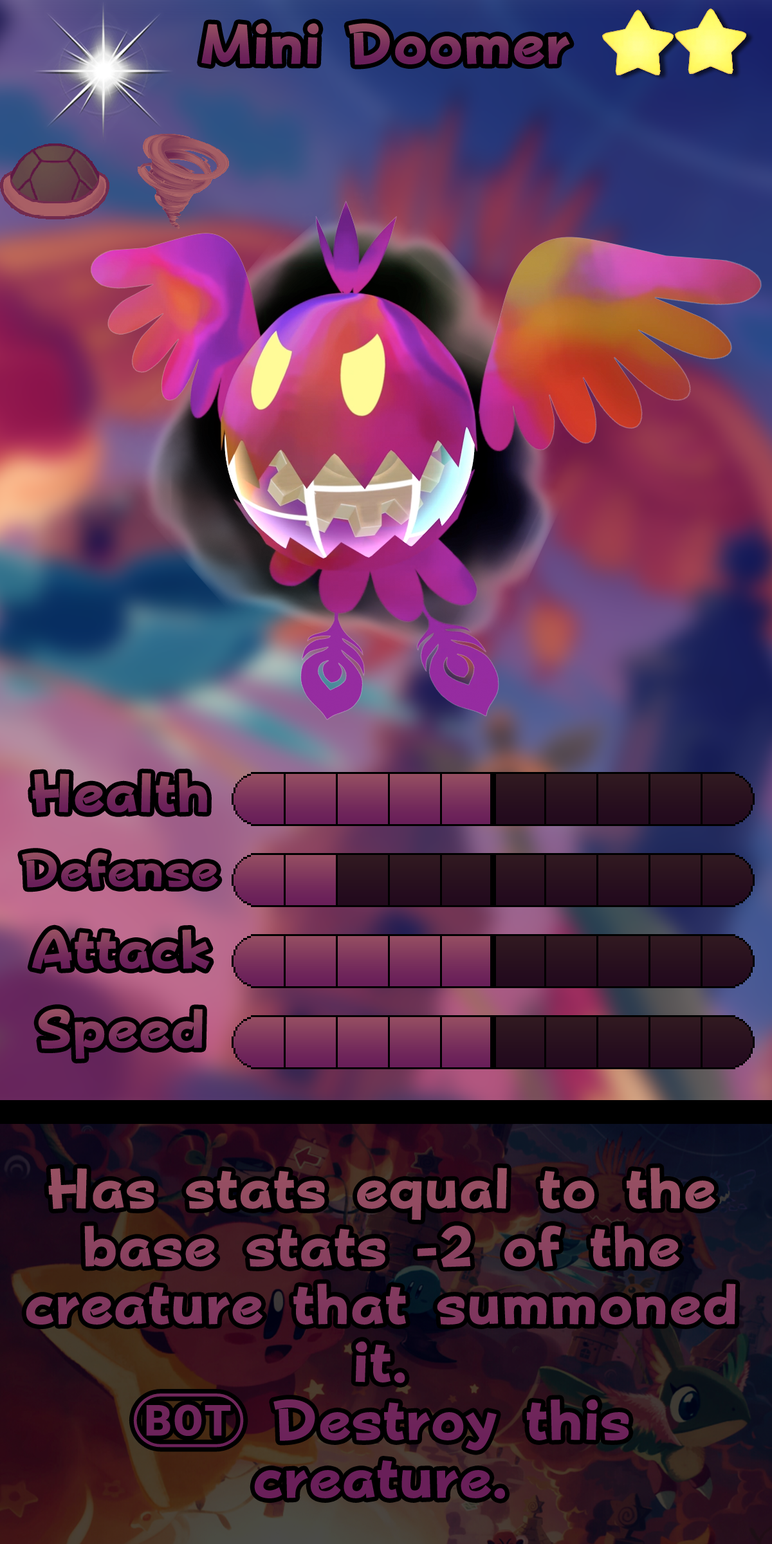
<style>
.page{position:relative;width:772px;height:1544px}
.page>*{position:absolute;margin:0}
.t1{font:96.5px "FOTPopHappinessStrp-ExtraBold";color:#762d5b}
.t2{font:92.7px "FOTPopHappinessStrp-ExtraBold";color:#772e5c}
.t3{font:81.1px "FOTPopHappinessStrp-ExtraBold";color:#762d5b}
.t4{font:92.7px "FOTPopHappinessStrp-ExtraBold";color:#762d5c}
.t5{font:92.7px "FOTPopHappinessStrp-ExtraBold";color:#7c335d}
.t6{font:96.5px/57.9px "FOTPopHappinessStrp-ExtraBold"}
.t7{font:96.5px/57.9px "stoogedings-Regular"}
</style>
<div class="page">
<p class="t1" style="left:201px;top:23px;width:369px;height:42px">Mini Doomer</p>
<p class="t2" style="left:32px;top:773px;width:175px;height:40px">Health</p>
<p class="t3" style="left:22px;top:853px;width:196px;height:35px">Defense</p>
<p class="t4" style="left:32px;top:929px;width:178px;height:41px">Attack</p>
<p class="t5" style="left:38px;top:1009px;width:165px;height:50px">Speed</p>
<p class="t6" style="left:26px;top:1168px;width:710px;height:331px;text-align:center">Has stats equal to the base stats -2 of the creature that summoned it. <br><span class="t7">(BOT)</span> Destroy this creature.</p>
</div>
